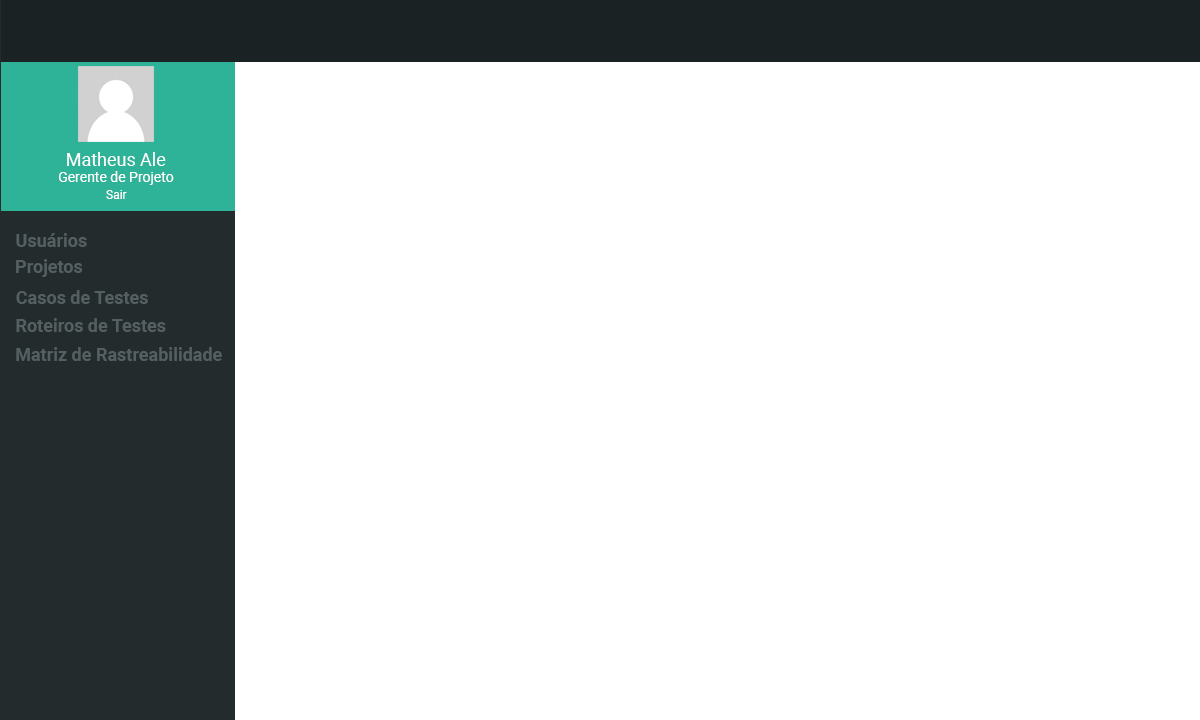
<style>
.page{position:relative;width:1200px;height:720px;background:#ffffff}
.page>*{position:absolute;margin:0}
.t1{font:18.1px "Roboto-Regular";color:#ffffff}
.t2{font:14.1px "Roboto-Regular";color:#ffffff}
.t3{font:12.1px "Roboto-Regular";color:#ffffff}
.t4{font:18px "Roboto-Bold";color:#545f61}
</style>
<div class="page">
<p class="t1" style="left:67px;top:152px;width:99px;height:14px">Matheus Ale</p>
<p class="t2" style="left:59px;top:171px;width:115px;height:14px">Gerente de Projeto</p>
<p class="t3" style="left:106px;top:190px;width:21px;height:9px">Sair</p>
<p class="t4" style="left:16px;top:233px;width:71px;height:14px">Usuários</p>
<p class="t4" style="left:16px;top:259px;width:67px;height:18px">Projetos</p>
<p class="t4" style="left:16px;top:290px;width:132px;height:14px">Casos de Testes</p>
<p class="t4" style="left:16px;top:318px;width:150px;height:14px">Roteiros de Testes</p>
<p class="t4" style="left:16px;top:347px;width:206px;height:14px">Matriz de Rastreabilidade</p>
</div>
